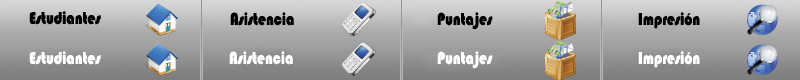
<style>
.page{position:relative;width:800px;height:80px}
.page>*{position:absolute;margin:0}
.t1{font:18px "Bauhaus93";color:#000000;scale:0.8 1}
.t2{font:18px "Bauhaus93";color:#ffffff;scale:0.8 1}
</style>
<div class="page">
<p class="t1" style="left:29px;top:11px;width:72px;height:14px">Estudiantes</p>
<p class="t1" style="left:230px;top:12px;width:64px;height:14px">Asistencia</p>
<p class="t1" style="left:437px;top:12px;width:56px;height:18px">Puntajes</p>
<p class="t1" style="left:638px;top:12px;width:62px;height:17px">Impresión</p>
<p class="t2" style="left:29px;top:51px;width:72px;height:14px">Estudiantes</p>
<p class="t2" style="left:229px;top:51px;width:64px;height:14px">Asistencia</p>
<p class="t2" style="left:437px;top:51px;width:56px;height:18px">Puntajes</p>
<p class="t2" style="left:638px;top:51px;width:62px;height:17px">Impresión</p>
</div>
